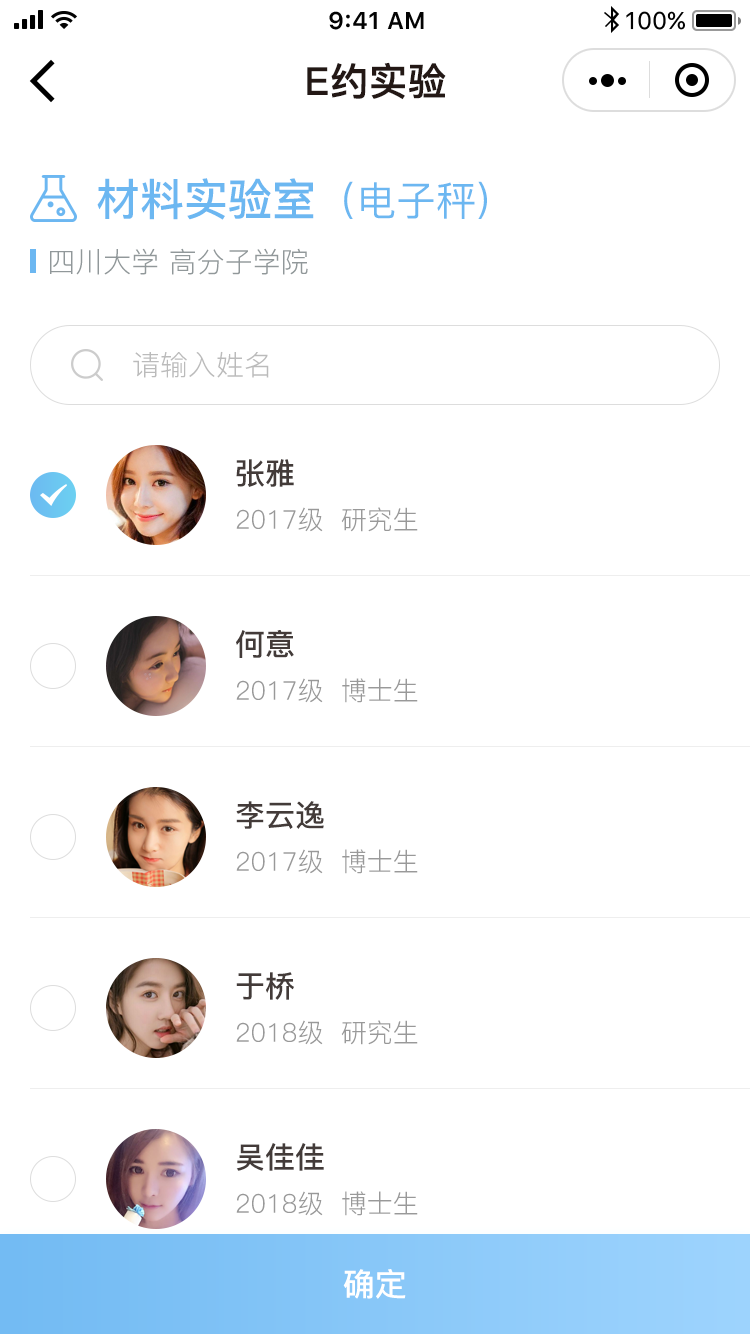
<style>
.page{position:relative;width:750px;height:1334px;background:#ffffff}
.page>*{position:absolute;margin:0}
.t1{font:38px "PingFang-SC-Bold";color:#231815;font-weight:bold}
.t2{font:44px "PingFang-SC-Bold";color:#6cb7f1}
.t3{font:40px "PingFang-SC-Medium";color:#6cb7f1}
.t4{font:28px "PingFang-SC-Regular";color:#91989a}
.t5{font:28px "PingFang-SC-Regular";color:#bbbbbb}
.t6{font:30px "PingFang-SC-Bold";color:#433b39}
.t7{font:26px "PingFang-SC-Regular";color:#999999}
.t8{font:32px "PingFang-SC-Bold";color:#ffffff}
</style>
<div class="page">
<p class="t1" style="left:307px;top:62px;width:139px;height:38px">E约实验</p>
<p class="t2" style="left:97px;top:178px;width:390px;height:42px">材料实验室<span class="t3">（电子秤)</span></p>
<p class="t4" style="left:50px;top:248px;width:258px;height:27px">四川大学 高分子学院</p>
<p class="t5" style="left:133px;top:351px;width:136px;height:27px">请输入姓名</p>
<p class="t6" style="left:236px;top:459px;width:58px;height:28px">张雅</p>
<p class="t7" style="left:236px;top:507px;width:182px;height:25px">2017级  研究生</p>
<p class="t6" style="left:236px;top:630px;width:58px;height:28px">何意</p>
<p class="t7" style="left:236px;top:678px;width:182px;height:25px">2017级  博士生</p>
<p class="t6" style="left:236px;top:801px;width:88px;height:28px">李云逸</p>
<p class="t7" style="left:236px;top:849px;width:182px;height:25px">2017级  博士生</p>
<p class="t6" style="left:236px;top:972px;width:58px;height:28px">于桥</p>
<p class="t7" style="left:236px;top:1020px;width:182px;height:25px">2018级  研究生</p>
<p class="t6" style="left:236px;top:1143px;width:88px;height:28px">吴佳佳</p>
<p class="t7" style="left:236px;top:1191px;width:182px;height:25px">2018级  博士生</p>
<p class="t8" style="left:343px;top:1269px;width:63px;height:30px">确定</p>
</div>
